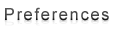
<style>
.page{position:relative;width:115px;height:32px;background:#ffffff}
.page>*{position:absolute;margin:0}
.t1{font:16.7px "ArialMT";letter-spacing:0.1em;color:#434343}
.t2{font:9px "ArialMT";letter-spacing:0.1em;color:#e3e3e3;scale:1.84 1}
</style>
<div class="page">
<p class="t1" style="left:5px;top:7px;width:104px;height:14px">Preferences</p>
<p class="t1" style="left:5px;top:7px;width:104px;height:14px">Preferences</p>
<p class="t2" style="left:5px;top:19px;width:104px;height:7px">Preferences</p>
</div>
